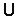
<style>
.page{position:relative;width:19px;height:19px;background:#ffffff}
.page>*{position:absolute;margin:0}
.t1{font:18px "Tahoma";letter-spacing:0.2em;color:#0c0c0c}
</style>
<div class="page">
<p class="t1" style="left:4px;top:3px;width:10px;height:13px">U</p>
</div>
